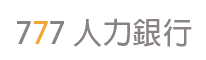
<style>
.page{position:relative;width:206px;height:60px;background:#ffffff}
.page>*{position:absolute;margin:0}
.t1{font:30px "AdobeFanHeitiStd-Bold";color:#888282}
.t2{font:30px "AdobeFanHeitiStd-Bold";color:#f3a534}
</style>
<div class="page">
<p class="t1" style="left:17px;top:18px;width:175px;height:29px">7<span class="t2">7</span>7 人力銀行</p>
</div>
